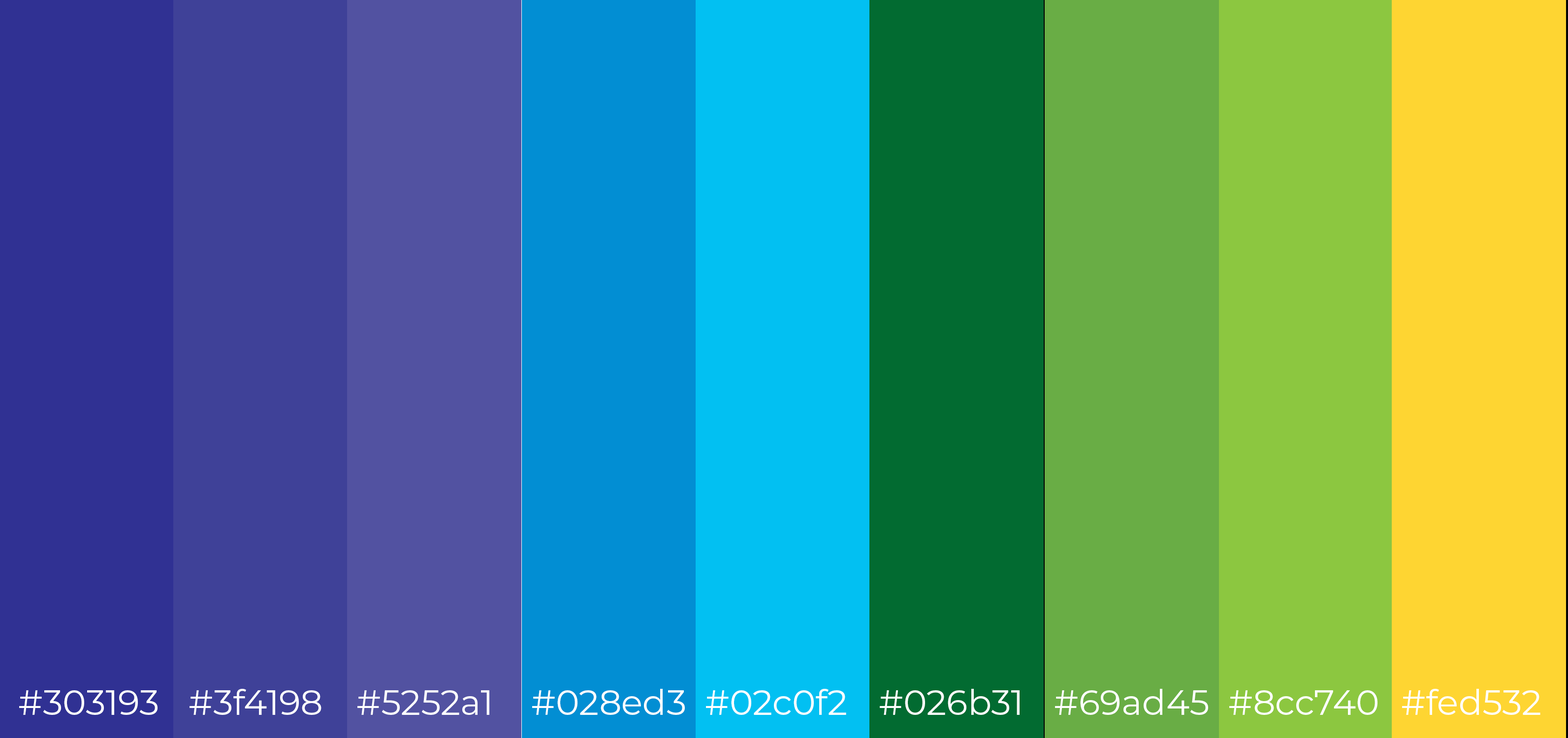
<style>
.page{position:relative;width:1568px;height:738px}
.page>*{position:absolute;margin:0}
.t1{font:35.2px "Montserrat-Regular";color:#ffffff}
</style>
<div class="page">
<p class="t1" style="left:190px;top:689px;width:131px;height:26px">#3f4198</p>
<p class="t1" style="left:532px;top:689px;width:153px;height:26px">#028ed3</p>
<p class="t1" style="left:706px;top:689px;width:140px;height:26px">#02c0f2</p>
<p class="t1" style="left:880px;top:689px;width:140px;height:26px">#026b31</p>
<p class="t1" style="left:1055px;top:689px;width:153px;height:26px">#69ad45</p>
<p class="t1" style="left:1402px;top:689px;width:138px;height:26px">#fed532</p>
<p class="t1" style="left:19px;top:691px;width:139px;height:24px">#303193</p>
<p class="t1" style="left:357px;top:691px;width:132px;height:24px">#5252a1</p>
<p class="t1" style="left:1229px;top:691px;width:148px;height:24px">#8cc740</p>
</div>
